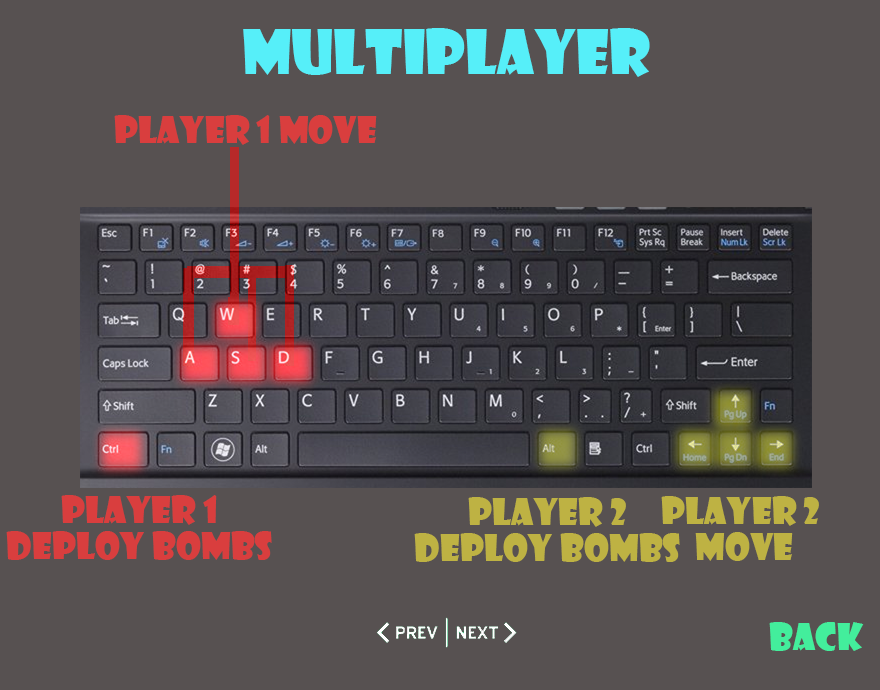
<style>
.page{position:relative;width:880px;height:690px;background:#575151}
.page>*{position:absolute;margin:0}
.t1{font:60px "ShowcardGothic-Reg";color:#56eff9}
.t2{font:36px "ShowcardGothic-Reg";color:#d93e3e}
.t3{font:36px/36px "ShowcardGothic-Reg";color:#d93e3e}
.t4{font:36px/36px "ShowcardGothic-Reg";color:#beb243}
.t5{font:36px "ShowcardGothic-Reg";color:#43ee9c}
</style>
<div class="page">
<p class="t1" style="left:243px;top:28px;width:407px;height:49px">MultiPlayer</p>
<p class="t2" style="left:114px;top:115px;width:263px;height:30px">Player 1 Move</p>
<p class="t3" style="left:6px;top:495px;width:266px;height:65px;text-align:center">Player 1 <br>Deploy bombs</p>
<p class="t4" style="left:414px;top:497px;width:266px;height:65px;text-align:center">Player 2 <br>Deploy bombs</p>
<p class="t4" style="left:661px;top:496px;width:158px;height:65px;text-align:center">Player 2 <br>Move</p>
<p class="t5" style="left:769px;top:622px;width:95px;height:29px">back</p>
</div>
